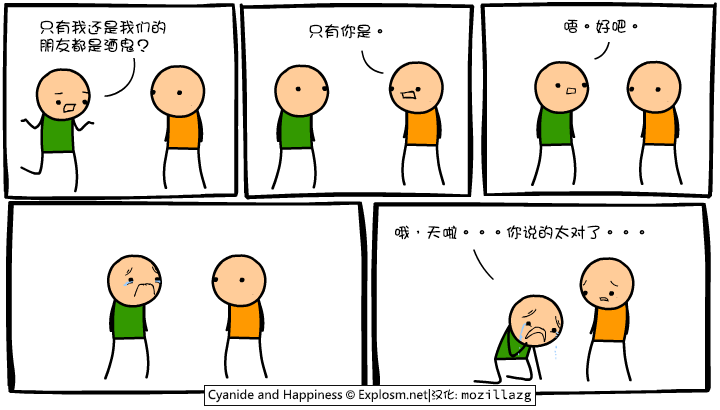
<style>
.page{position:relative;width:720px;height:410px;background:#ffffff}
.page>*{position:absolute;margin:0}
.t1{font:16px/18px "DFGirl";color:#000000}
.t2{font:16px "DFGirl";color:#000000}
</style>
<div class="page">
<p class="t1" style="left:40px;top:20px;width:126px;height:33px">只有我还是我们的<br>朋友都是酒鬼？</p>
<p class="t2" style="left:309px;top:24px;width:74px;height:15px">只有你是。</p>
<p class="t2" style="left:564px;top:19px;width:74px;height:15px">唔。好吧。</p>
<p class="t2" style="left:395px;top:225px;width:250px;height:15px">哦，天啦。。。你说的太对了。。。</p>
</div>
